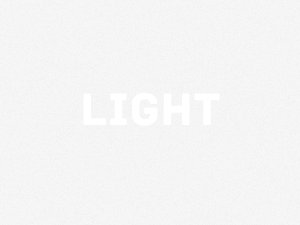
<style>
.page{position:relative;width:300px;height:225px;background:#f6f6f6}
.page>*{position:absolute;margin:0}
.t1{font:48px "Archive";color:#ffffff}
</style>
<div class="page">
<p class="t1" style="left:83px;top:92px;width:137px;height:34px">Light</p>
</div>
